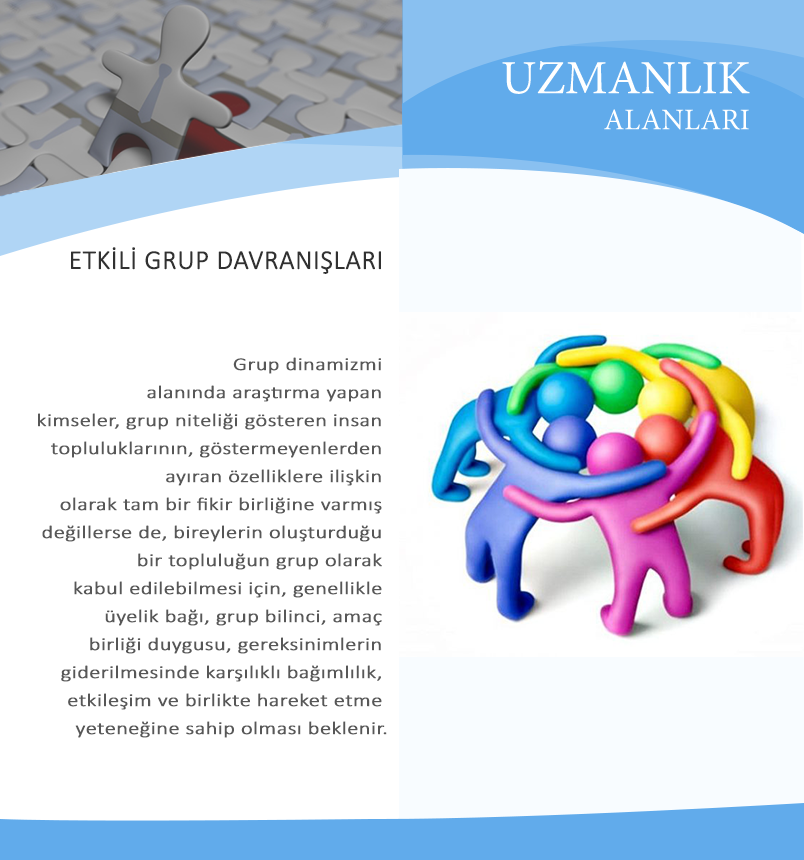
<style>
.page{position:relative;width:804px;height:860px;background:#ffffff}
.page>*{position:absolute;margin:0}
.t1{font:47.6px "MinionPro-Regular";color:#ffffff}
.t2{font:30px "MinionPro-Regular";color:#ffffff}
.t3{font:27px "Calibri-Light";color:#313131;font-weight:bold}
.t4{font:18.1px/28px "Calibri-Light";color:#575757;font-weight:bold;scale:1.22 1}
</style>
<div class="page">
<p class="t1" style="left:502px;top:61px;width:248px;height:69px;text-align:right">UZMANLIK<br><span class="t2"> ALANLARI</span></p>
<p class="t3" style="left:71px;top:247px;width:310px;height:27px">ETKİLİ GRUP DAVRANIŞLARI</p>
<p class="t4" style="left:38px;top:357px;width:349px;height:381px;text-align:right">Grup dinamizmi <br>alanında araştırma yapan <br>kimseler, grup niteliği gösteren insan <br>topluluklarının, göstermeyenlerden <br>ayıran özelliklere ilişkin <br>olarak tam bir fikir birliğine varmış <br>değillerse de, bireylerin oluşturduğu <br>bir topluluğun grup olarak <br>kabul edilebilmesi için, genellikle <br>üyelik bağı, grup bilinci, amaç <br>birliği duygusu, gereksinimlerin <br>giderilmesinde karşılıklı bağımlılık, <br>etkileşim ve birlikte hareket etme <br>yeteneğine sahip olması beklenir.</p>
</div>
